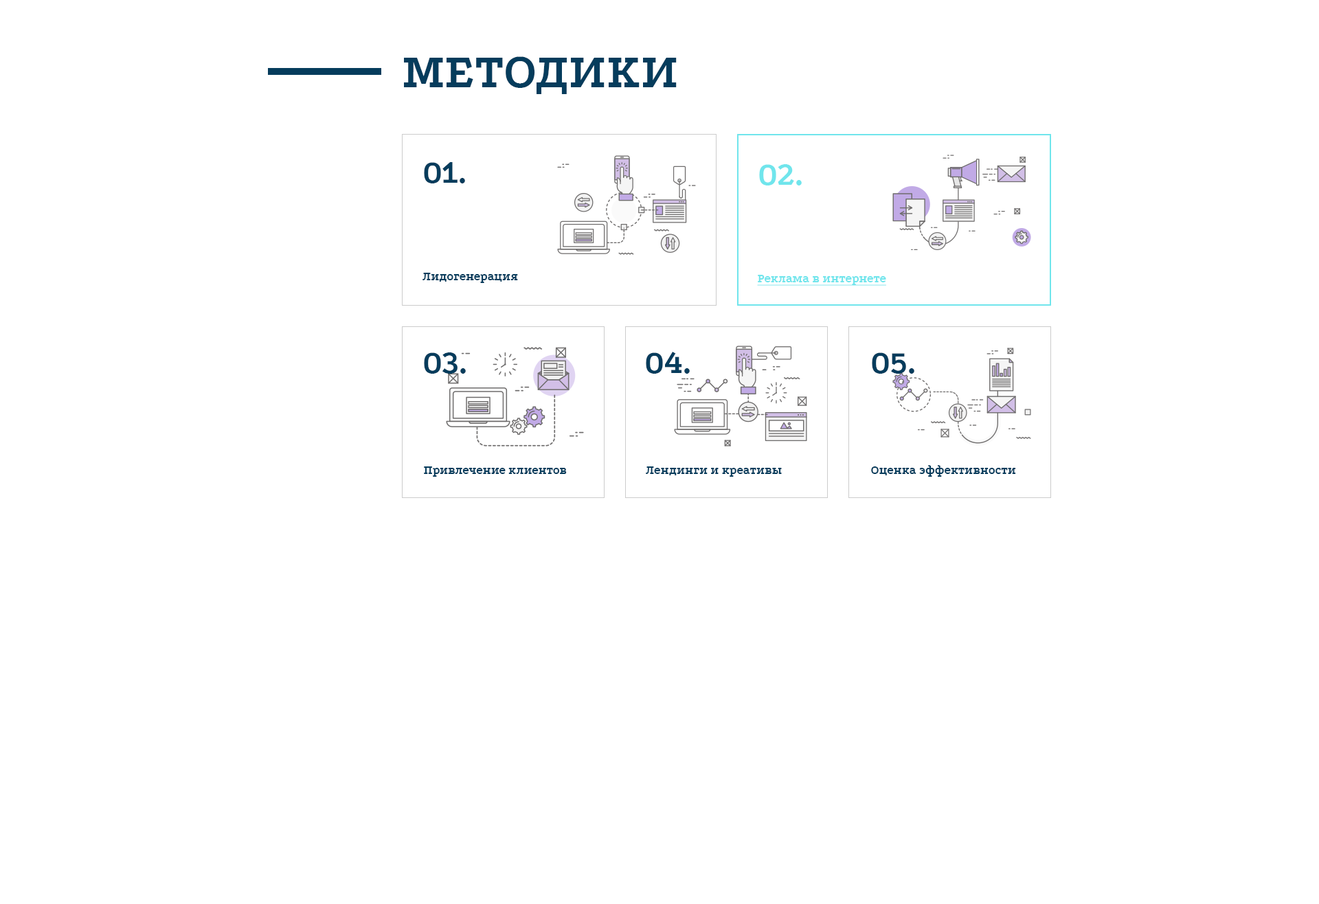
<style>
.page{position:relative;width:1319px;height:904px;background:#ffffff}
.page>*{position:absolute;margin:0}
.t1{font:49.5px "Podkova-Bold";color:#053c5c;text-transform:uppercase}
.t2{font:33px "Podkova-Bold";color:#053c5c}
.t3{font:33px "Podkova-Bold";color:#70e5ec}
.t4{font:12.4px "Podkova-Bold";color:#053c5c}
.t5{font:12.4px "Podkova-Bold";color:#70e5ec;text-decoration:underline}
</style>
<div class="page">
<p class="t1" style="left:404px;top:56px;width:273px;height:38px">методики</p>
<p class="t2" style="left:424px;top:162px;width:41px;height:21px">01.</p>
<p class="t3" style="left:759px;top:164px;width:43px;height:21px">02.</p>
<p class="t4" style="left:422px;top:273px;width:96px;height:10px">Лидогенерация</p>
<p class="t5" style="left:757px;top:275px;width:129px;height:11px">Реклама в интернете</p>
<p class="t2" style="left:424px;top:352px;width:42px;height:22px">03.</p>
<p class="t2" style="left:646px;top:352px;width:44px;height:22px">04.</p>
<p class="t2" style="left:872px;top:352px;width:42px;height:22px">05.</p>
<p class="t4" style="left:424px;top:466px;width:143px;height:11px">Привлечение клиентов</p>
<p class="t4" style="left:646px;top:466px;width:136px;height:11px">Лендинги и креативы</p>
<p class="t4" style="left:871px;top:465px;width:145px;height:12px">Оценка эффективности</p>
</div>
